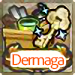
<style>
.page{position:relative;width:75px;height:75px}
.page>*{position:absolute;margin:0}
.t1{font:16px "AdobeClean-Regular";letter-spacing:-0.08em;color:#ff5a00}
</style>
<div class="page">
<p class="t1" style="left:12px;top:54px;width:53px;height:16px">Dermaga</p>
</div>
